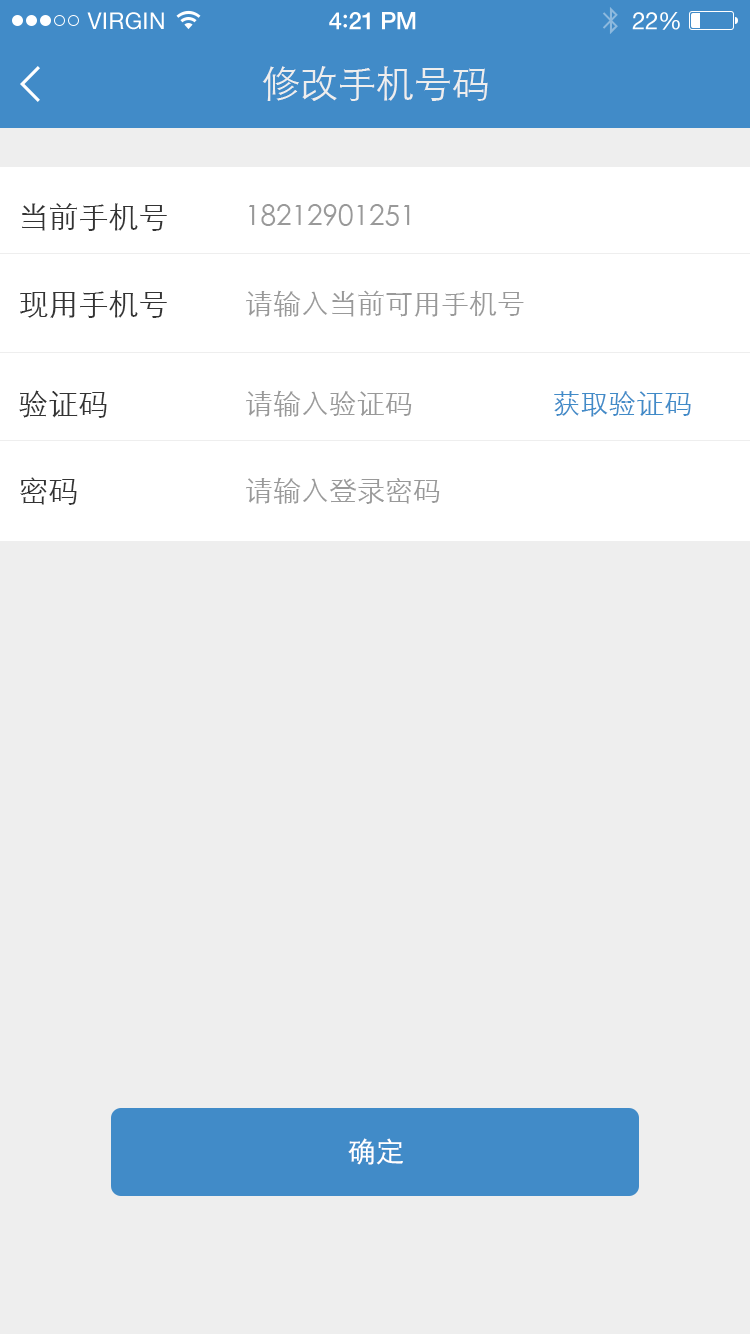
<style>
.page{position:relative;width:750px;height:1334px;background:#eeeeee}
.page>*{position:absolute;margin:0}
.t1{font:23px "HelveticaNeue";letter-spacing:0.02em;color:#ffffff}
.t2{font:24px "HelveticaNeue-Medium";letter-spacing:-0.02em;color:#ffffff}
.t3{font:26px "Avenir-Medium";letter-spacing:-0.02em;color:#ffffff}
.t4{font:24px "HelveticaNeue";letter-spacing:-0.02em;color:#ffffff}
.t5{font:38px "STXihei";color:#eeeeee}
.t6{font:30px "STXihei";color:#333333}
.t7{font:28px "STXihei";color:#999999}
.t8{font:28px "STXihei";color:#418bc8}
.t9{font:28px "STXihei";color:#ffffff}
</style>
<div class="page">
<p class="t1" style="left:87px;top:12px;width:77px;height:18px">VIRGIN</p>
<p class="t2" style="left:329px;top:12px;width:87px;height:18px">4<span class="t3">:</span>21 PM</p>
<p class="t4" style="left:632px;top:12px;width:48px;height:18px">22%</p>
<p class="t5" style="left:262px;top:66px;width:226px;height:35px">修改手机号码</p>
<p class="t6" style="left:22px;top:203px;width:145px;height:28px">当前手机号</p>
<p class="t7" style="left:249px;top:204px;width:161px;height:22px">18212901251</p>
<p class="t6" style="left:20px;top:290px;width:147px;height:28px">现用手机号</p>
<p class="t7" style="left:246px;top:290px;width:278px;height:27px">请输入当前可用手机号</p>
<p class="t6" style="left:19px;top:390px;width:88px;height:28px">验证码</p>
<p class="t7" style="left:246px;top:390px;width:166px;height:27px">请输入验证码</p>
<p class="t8" style="left:554px;top:391px;width:137px;height:26px">获取验证码</p>
<p class="t6" style="left:20px;top:477px;width:57px;height:28px">密码</p>
<p class="t7" style="left:246px;top:477px;width:194px;height:27px">请输入登录密码</p>
<p class="t9" style="left:348px;top:1138px;width:55px;height:27px">确定</p>
</div>
